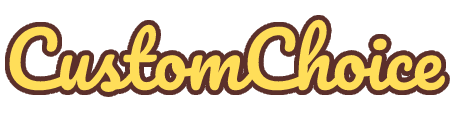
<style>
.page{position:relative;width:455px;height:113px;background:#ffffff}
.page>*{position:absolute;margin:0}
.t1{font:74.8px "Pacifico-Regular";color:#ffde59}
</style>
<div class="page">
<p class="t1" style="left:9px;top:19px;width:436px;height:74px">CustomChoice</p>
</div>
